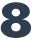
<style>
.page{position:relative;width:32px;height:40px;background:#2f3e4e}
.page>*{position:absolute;margin:0}
.t1{font:48px "SFProDisplay-Black";color:#2f3e4e}
</style>
<div class="page">
<p class="t1" style="left:0px;top:2px;width:31px;height:36px">8</p>
</div>
